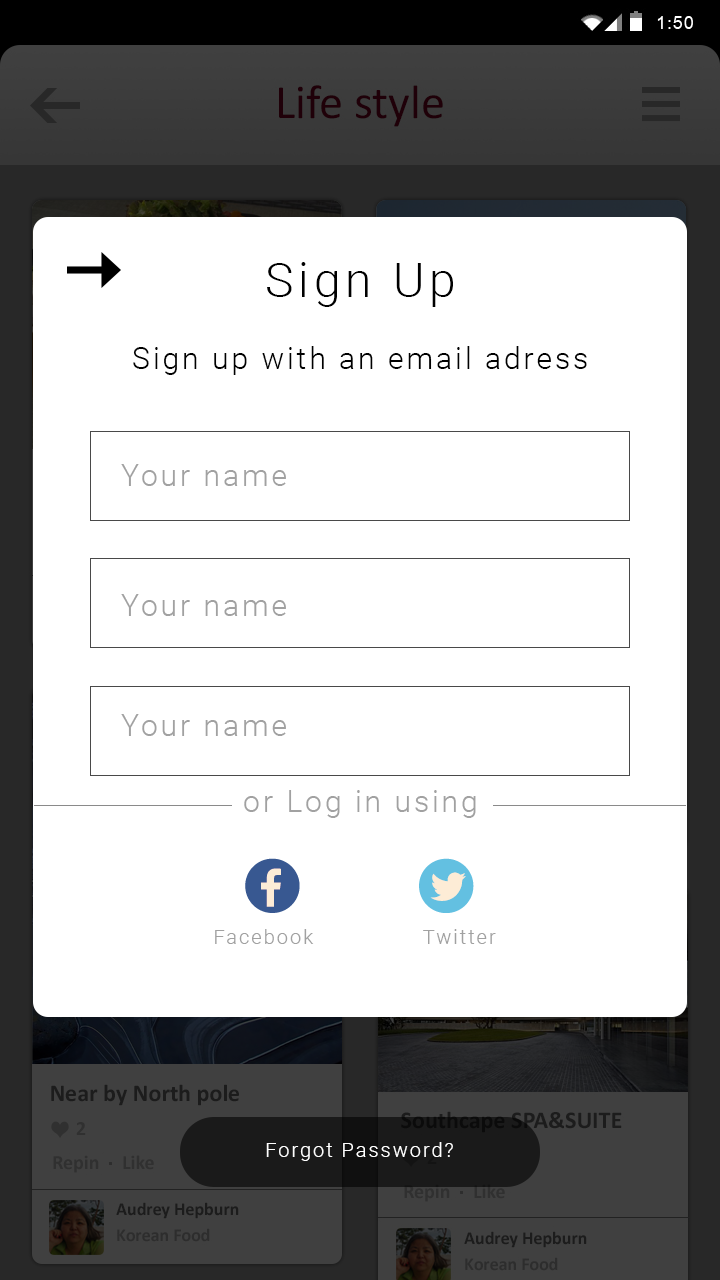
<style>
.page{position:relative;width:720px;height:1280px;background:#ffffff}
.page>*{position:absolute;margin:0}
.t1{font:30px/36px "Roboto-Light";letter-spacing:0.1em;color:#000000}
.t2{font:48px/36px "Roboto-Light";letter-spacing:0.1em;color:#000000}
.t3{font:30px "Roboto-Light";letter-spacing:0.1em;color:#a1a1a1}
.t4{font:20px "Roboto-Light";letter-spacing:0.1em;color:#a1a1a1}
.t5{font:20px "Roboto-Light";letter-spacing:0.1em;color:#ffffff}
</style>
<div class="page">
<p class="t1" style="left:133px;top:262px;width:454px;height:113px;text-align:center"><span class="t2">Sign Up<br><br></span>Sign up with an email adress</p>
<p class="t3" style="left:121px;top:464px;width:165px;height:22px">Your name</p>
<p class="t3" style="left:121px;top:594px;width:165px;height:22px">Your name</p>
<p class="t3" style="left:121px;top:714px;width:165px;height:22px">Your name</p>
<p class="t3" style="left:244px;top:790px;width:232px;height:28px">or Log in using</p>
<p class="t4" style="left:215px;top:929px;width:99px;height:15px">Facebook</p>
<p class="t4" style="left:423px;top:929px;width:73px;height:15px">Twitter</p>
<p class="t5" style="left:266px;top:1142px;width:187px;height:19px">Forgot Password?</p>
</div>
